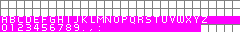
<style>
.page{position:relative;width:240px;height:32px;background:#ffffff}
.page>*{position:absolute;margin:0}
.t1{font:8px "PFTempestaSeven";color:#ffffff}
</style>
<div class="page">
<p class="t1" style="left:2px;top:16px;width:5px;height:7px">A</p>
<p class="t1" style="left:10px;top:16px;width:5px;height:7px">B</p>
<p class="t1" style="left:18px;top:16px;width:5px;height:7px">C</p>
<p class="t1" style="left:26px;top:16px;width:5px;height:7px">D</p>
<p class="t1" style="left:34px;top:16px;width:5px;height:7px">E</p>
<p class="t1" style="left:42px;top:16px;width:5px;height:7px">F</p>
<p class="t1" style="left:50px;top:16px;width:5px;height:7px">G</p>
<p class="t1" style="left:58px;top:16px;width:5px;height:7px">H</p>
<p class="t1" style="left:74px;top:16px;width:4px;height:7px">J</p>
<p class="t1" style="left:82px;top:16px;width:5px;height:7px">K</p>
<p class="t1" style="left:91px;top:16px;width:4px;height:7px">L</p>
<p class="t1" style="left:97px;top:16px;width:7px;height:7px">M</p>
<p class="t1" style="left:105px;top:16px;width:6px;height:7px">N</p>
<p class="t1" style="left:114px;top:16px;width:5px;height:7px">O</p>
<p class="t1" style="left:122px;top:16px;width:5px;height:7px">P</p>
<p class="t1" style="left:130px;top:16px;width:5px;height:8px">Q</p>
<p class="t1" style="left:138px;top:16px;width:5px;height:7px">R</p>
<p class="t1" style="left:146px;top:16px;width:5px;height:7px">S</p>
<p class="t1" style="left:154px;top:16px;width:5px;height:7px">T</p>
<p class="t1" style="left:162px;top:16px;width:5px;height:7px">U</p>
<p class="t1" style="left:170px;top:16px;width:5px;height:7px">V</p>
<p class="t1" style="left:177px;top:16px;width:7px;height:7px">W</p>
<p class="t1" style="left:186px;top:16px;width:5px;height:7px">X</p>
<p class="t1" style="left:194px;top:16px;width:5px;height:7px">Y</p>
<p class="t1" style="left:202px;top:16px;width:5px;height:7px">Z</p>
<p class="t1" style="left:2px;top:24px;width:5px;height:7px">0</p>
<p class="t1" style="left:11px;top:24px;width:2px;height:7px">1</p>
<p class="t1" style="left:18px;top:24px;width:5px;height:7px">2</p>
<p class="t1" style="left:26px;top:24px;width:5px;height:7px">3</p>
<p class="t1" style="left:34px;top:24px;width:5px;height:7px">4</p>
<p class="t1" style="left:42px;top:24px;width:5px;height:7px">5</p>
<p class="t1" style="left:50px;top:24px;width:5px;height:7px">6</p>
<p class="t1" style="left:58px;top:24px;width:5px;height:7px">7</p>
<p class="t1" style="left:66px;top:24px;width:5px;height:7px">8</p>
<p class="t1" style="left:74px;top:24px;width:5px;height:7px">9</p>
<p class="t1" style="left:90px;top:29px;width:2px;height:2px">,</p>
<p class="t1" style="left:99px;top:26px;width:1px;height:5px">:</p>
</div>
